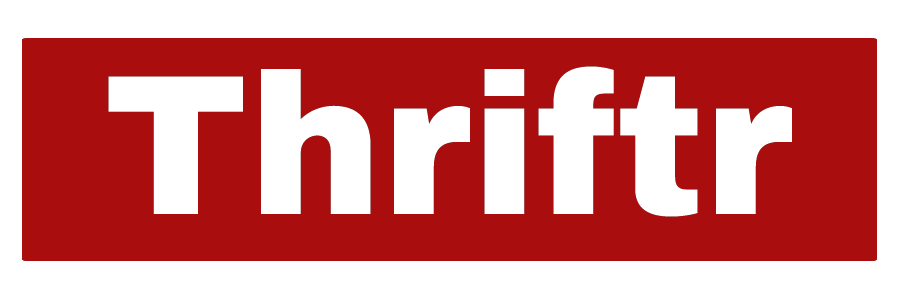
<style>
.page{position:relative;width:900px;height:300px;background:#aa0d0d}
.page>*{position:absolute;margin:0}
.t1{font:200px "Archivo-Black";color:#ffffff}
</style>
<div class="page">
<p class="t1" style="left:108px;top:66px;width:684px;height:151px">Thriftr</p>
</div>
